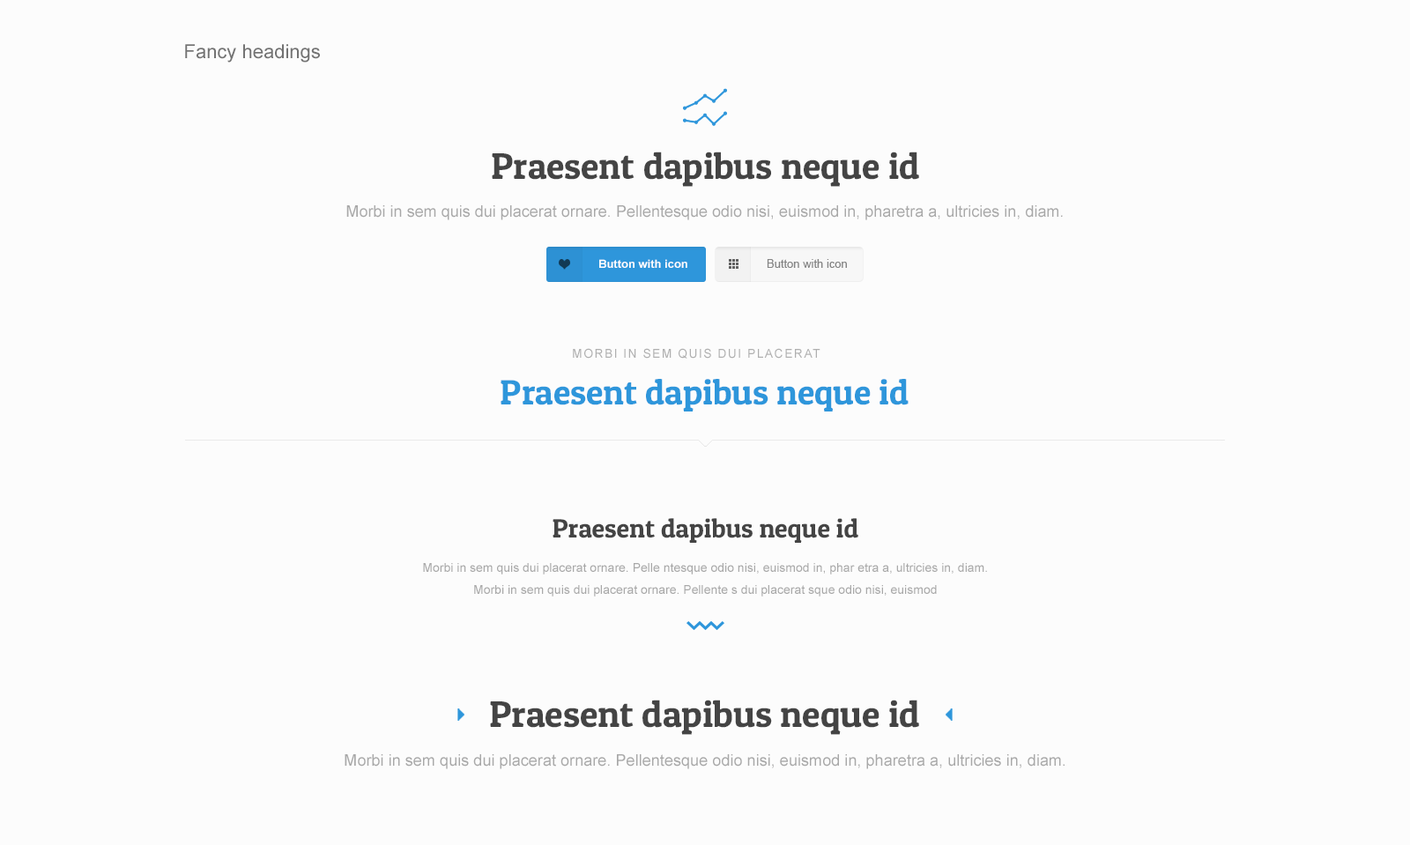
<style>
.page{position:relative;width:1410px;height:845px;background:#fcfcfc}
.page>*{position:absolute;margin:0}
.t1{font:19.4px "ArialMT";color:#737373}
.t2{font:37px "PatuaOne-Regular";color:#444444}
.t3{font:15.9px "ArialMT";color:#a8a8a8}
.t4{font:11.5px "Arial-BoldMT";color:#ffffff}
.t5{font:11.5px "ArialMT";color:#747474}
.t6{font:12.3px "ArialMT";letter-spacing:0.1em;color:#afafaf;text-transform:uppercase}
.t7{font:35.3px "PatuaOne-Regular";color:#2e96db}
.t8{font:26.4px "PatuaOne-Regular";color:#444444}
.t9{font:12.3px/22px "ArialMT";color:#a8a8a8}
</style>
<div class="page">
<p class="t1" style="left:185px;top:44px;width:135px;height:19px">Fancy headings</p>
<p class="t2" style="left:492px;top:152px;width:427px;height:35px">Praesent dapibus neque id</p>
<p class="t3" style="left:346px;top:205px;width:717px;height:15px">Morbi in sem quis dui placerat ornare. Pellentesque odio nisi, euismod in, pharetra a, ultricies in, diam.</p>
<p class="t4" style="left:599px;top:259px;width:89px;height:9px">Button with icon</p>
<p class="t5" style="left:767px;top:259px;width:80px;height:9px;opacity:0.9">Button with icon</p>
<p class="t6" style="left:573px;top:348px;width:248px;height:11px">Morbi in sem quis dui placerat</p>
<p class="t7" style="left:501px;top:379px;width:408px;height:33px">Praesent dapibus neque id</p>
<p class="t8" style="left:553px;top:518px;width:306px;height:25px">Praesent dapibus neque id</p>
<p class="t9" style="left:423px;top:563px;width:564px;height:34px;text-align:center">Morbi in sem quis dui placerat ornare. Pelle ntesque odio nisi, euismod in, phar etra a, ultricies in, diam. <br>Morbi in sem quis dui placerat ornare. Pellente s dui placerat sque odio nisi, euismod</p>
<p class="t2" style="left:490px;top:700px;width:429px;height:35px">Praesent dapibus neque id</p>
<p class="t3" style="left:345px;top:755px;width:720px;height:15px">Morbi in sem quis dui placerat ornare. Pellentesque odio nisi, euismod in, pharetra a, ultricies in, diam.</p>
</div>
